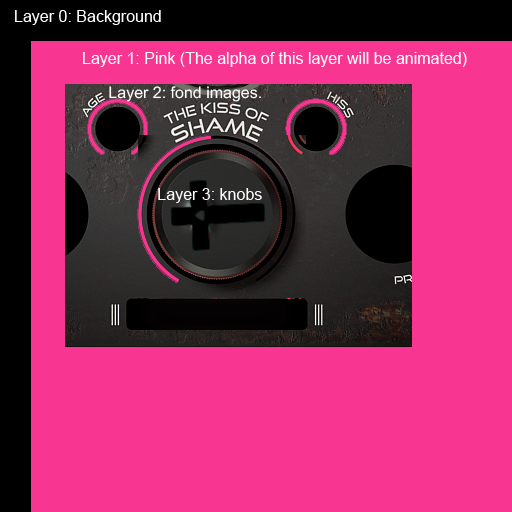
<style>
.page{position:relative;width:512px;height:512px;background:#f83591}
.page>*{position:absolute;margin:0}
.t1{font:16px "ArialMT";color:#ffffff}
</style>
<div class="page">
<p class="t1" style="left:15px;top:10px;width:146px;height:15px">Layer 0: Background</p>
<p class="t1" style="left:83px;top:52px;width:384px;height:15px">Layer 1: Pink (The alpha of this layer will be animated)</p>
<p class="t1" style="left:109px;top:86px;width:152px;height:16px">Layer 2: fond images.</p>
<p class="t1" style="left:158px;top:188px;width:104px;height:15px">Layer 3: knobs</p>
</div>
